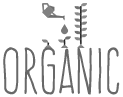
<style>
.page{position:relative;width:123px;height:97px;background:#ffffff}
.page>*{position:absolute;margin:0}
.t1{font:57px "FrenteH1-Regular";color:#686868}
</style>
<div class="page">
<p class="t1" style="left:3px;top:47px;width:117px;height:48px">ORGANIC</p>
</div>
